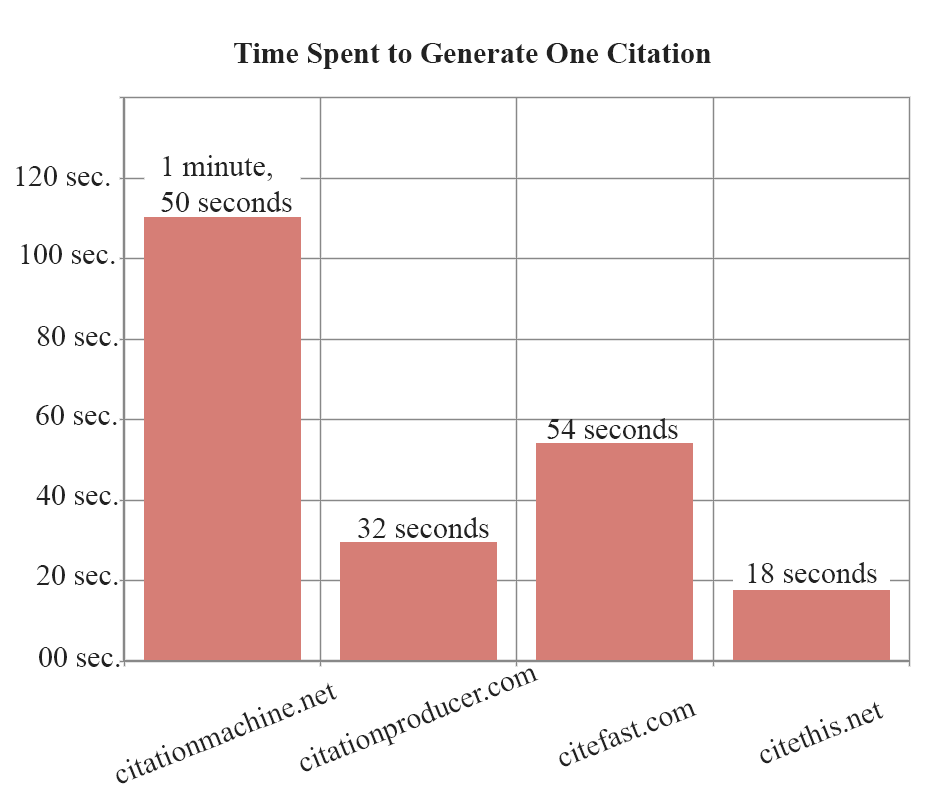
<style>
.page{position:relative;width:930px;height:805px;background:#ffffff}
.page>*{position:absolute;margin:0}
.t1{font:30px "TimesNewRomanPS-BoldMT";color:#222222}
.t2{font:30px "TimesNewRomanPSMT";color:#222222}
</style>
<div class="page">
<p class="t1" style="left:234px;top:43px;width:477px;height:26px">Time Spent to Generate One Citation</p>
<p class="t2" style="left:161px;top:155px;width:131px;height:57px">1 minute,<br>50 seconds</p>
<p class="t2" style="left:16px;top:166px;width:94px;height:20px">120 sec.</p>
<p class="t2" style="left:21px;top:244px;width:94px;height:20px">100 sec.</p>
<p class="t2" style="left:37px;top:326px;width:81px;height:20px">80 sec.</p>
<p class="t2" style="left:36px;top:405px;width:81px;height:20px">60 sec.</p>
<p class="t2" style="left:547px;top:418px;width:131px;height:21px">54 seconds</p>
<p class="t2" style="left:36px;top:485px;width:82px;height:20px">40 sec.</p>
<p class="t2" style="left:358px;top:517px;width:131px;height:21px">32 seconds</p>
<p class="t2" style="left:36px;top:565px;width:82px;height:20px">20 sec.</p>
<p class="t2" style="left:748px;top:562px;width:129px;height:21px">18 seconds</p>
<p class="t2" style="left:39px;top:647px;width:81px;height:20px">00 sec.</p>
<p class="t2" style="left:300px;top:668px;width:239px;height:104px;rotate:-22deg">citationproducer.com</p>
<p class="t2" style="left:116px;top:682px;width:221px;height:102px;rotate:-22deg">citationmachine.net</p>
<p class="t2" style="left:760px;top:701px;width:124px;height:63px;rotate:-22deg">citethis.net</p>
<p class="t2" style="left:559px;top:703px;width:138px;height:64px;rotate:-22deg">citefast.com</p>
</div>
